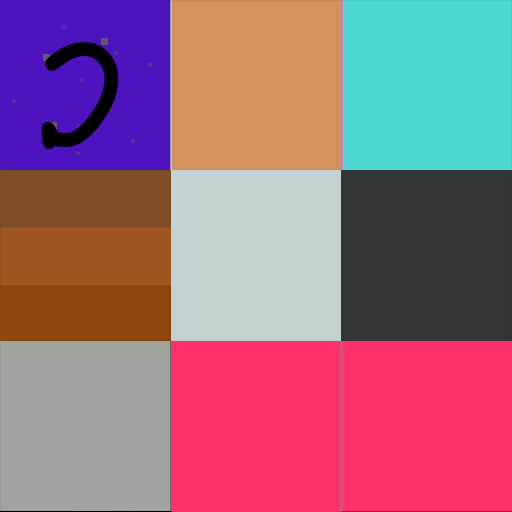
<style>
.page{position:relative;width:512px;height:512px;background:#ff316a}
.page>*{position:absolute;margin:0}
.t1{font:140.9px "ComicSansMS";color:#000000}
</style>
<div class="page">
<p class="t1" style="left:41px;top:42px;width:78px;height:107px;rotate:180deg">C</p>
</div>
